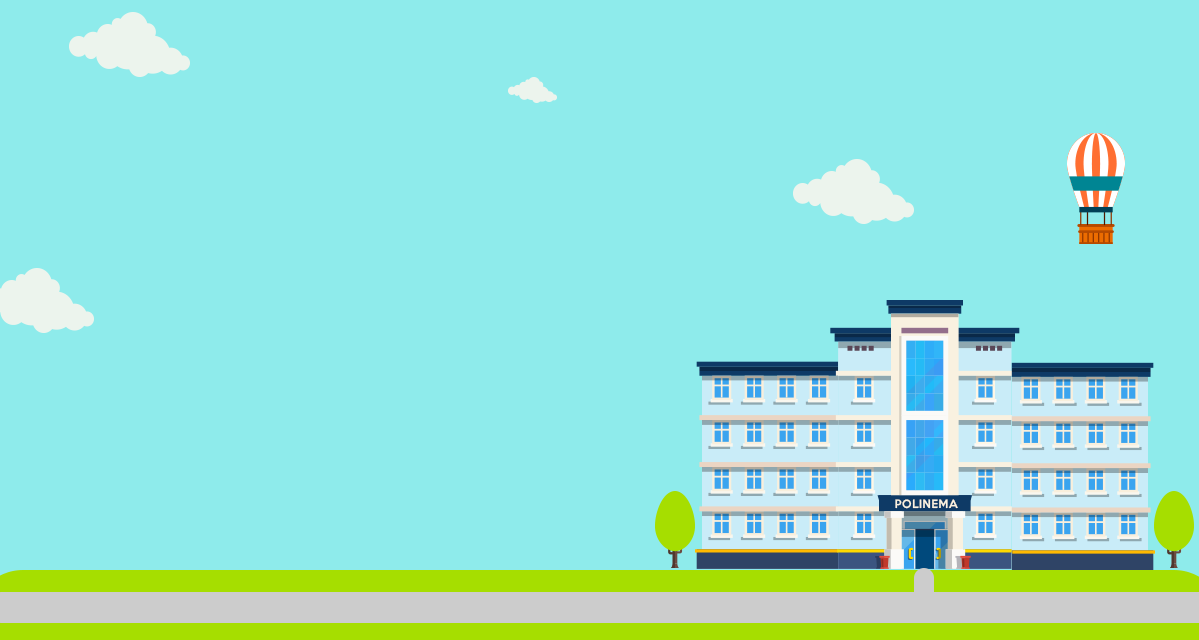
<style>
.page{position:relative;width:1199px;height:640px;background:#8eebeb}
.page>*{position:absolute;margin:0}
.t1{font:10.4px "KeepCalm-Medium";letter-spacing:0.04em;color:#faf2e1;text-transform:uppercase}
</style>
<div class="page">
<p class="t1" style="left:895px;top:499px;width:63px;height:10px">polinema</p>
</div>
